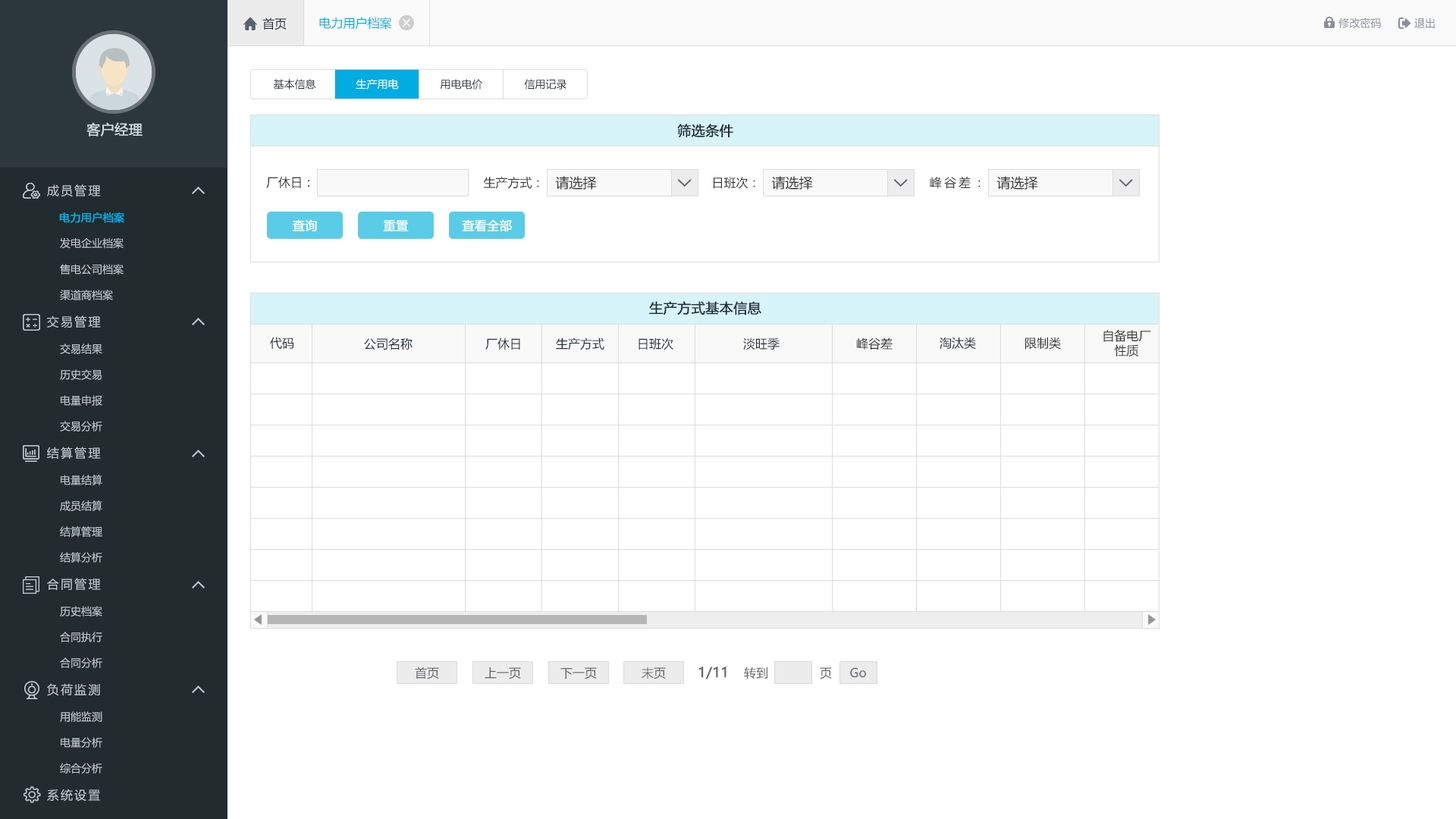
<style>
.page{position:relative;width:1456px;height:819px;background:#ffffff}
.page>*{position:absolute;margin:0}
.t1{font:12.1px "MicrosoftYaHei";color:#242e3b}
.t2{font:12.1px "MicrosoftYaHei";color:#00ace2}
.t3{font:10.6px "MicrosoftYaHei";color:#8a8f99}
.t4{font:10.6px "MicrosoftYaHei";color:#242e3b}
.t5{font:10.6px "MicrosoftYaHei";color:#ffffff}
.t6{font:13.6px "MicrosoftYaHei";color:#d1dce2;font-weight:bold}
.t7{font:13.6px "MicrosoftYaHei";color:#242e3b;font-weight:bold}
.t8{font:12.1px "MicrosoftYaHei";letter-spacing:0.14em;color:#c2cdd2}
.t9{font:12.1px "MicrosoftYaHei";color:#333333}
.t10{font:13.6px "MicrosoftYaHei";color:#333333}
.t11{font:12.1px "MicrosoftYaHei";letter-spacing:0.2em;color:#333333}
.t12{font:10.6px "MicrosoftYaHei";color:#00ace2;font-weight:bold}
.t13{font:12.1px "MicrosoftYaHei";color:#ffffff;font-weight:bold}
.t14{font:10.6px "MicrosoftYaHei";color:#c2cdd2}
.t15{font:12.1px "MicrosoftYaHei";color:#61656b}
.t16{font:13.6px "MicrosoftYaHei";color:#61656b;font-weight:bold}
</style>
<div class="page">
<p class="t1" style="left:262px;top:17px;width:25px;height:13px">首页</p>
<p class="t2" style="left:319px;top:17px;width:73px;height:13px">电力用户档案</p>
<p class="t3" style="left:1338px;top:17px;width:43px;height:12px">修改密码</p>
<p class="t3" style="left:1414px;top:17px;width:21px;height:11px">退出</p>
<p class="t4" style="left:273px;top:79px;width:43px;height:10px">基本信息</p>
<p class="t5" style="left:356px;top:79px;width:43px;height:10px">生产用电</p>
<p class="t4" style="left:440px;top:79px;width:43px;height:10px">用电电价</p>
<p class="t4" style="left:524px;top:79px;width:42px;height:10px">信用记录</p>
<p class="t6" style="left:86px;top:122px;width:57px;height:14px">客户经理</p>
<p class="t7" style="left:677px;top:124px;width:56px;height:14px">筛选条件</p>
<p class="t8" style="left:47px;top:184px;width:54px;height:13px">成员管理</p>
<p class="t9" style="left:266px;top:176px;width:43px;height:12px">厂休日：</p>
<p class="t9" style="left:483px;top:177px;width:56px;height:12px">生产方式：</p>
<p class="t10" style="left:555px;top:176px;width:42px;height:14px">请选择</p>
<p class="t9" style="left:714px;top:177px;width:41px;height:12px">日班次：</p>
<p class="t10" style="left:771px;top:176px;width:42px;height:14px">请选择</p>
<p class="t11" style="left:930px;top:177px;width:51px;height:12px">峰谷差<span class="t9">：</span></p>
<p class="t10" style="left:996px;top:176px;width:42px;height:14px">请选择</p>
<p class="t12" style="left:59px;top:212px;width:65px;height:11px">电力用户档案</p>
<p class="t13" style="left:292px;top:219px;width:25px;height:12px">查询</p>
<p class="t13" style="left:383px;top:220px;width:26px;height:11px">重置</p>
<p class="t13" style="left:462px;top:219px;width:50px;height:13px">查看全部</p>
<p class="t14" style="left:60px;top:237px;width:64px;height:12px">发电企业档案</p>
<p class="t14" style="left:60px;top:264px;width:64px;height:11px">售电公司档案</p>
<p class="t14" style="left:60px;top:290px;width:53px;height:10px">渠道商档案</p>
<p class="t7" style="left:649px;top:301px;width:112px;height:14px">生产方式基本信息</p>
<p class="t8" style="left:47px;top:315px;width:54px;height:13px">交易管理</p>
<p class="t9" style="left:1103px;top:329px;width:48px;height:27px;text-align:center">自备电厂<br>性质</p>
<p class="t1" style="left:270px;top:337px;width:24px;height:12px">代码</p>
<p class="t1" style="left:364px;top:337px;width:49px;height:13px">公司名称</p>
<p class="t1" style="left:485px;top:337px;width:35px;height:13px">厂休日</p>
<p class="t1" style="left:556px;top:337px;width:48px;height:13px">生产方式</p>
<p class="t1" style="left:639px;top:337px;width:34px;height:13px">日班次</p>
<p class="t1" style="left:743px;top:337px;width:37px;height:13px">淡旺季</p>
<p class="t9" style="left:856px;top:337px;width:37px;height:13px">峰谷差</p>
<p class="t1" style="left:940px;top:337px;width:36px;height:13px">淘汰类</p>
<p class="t9" style="left:1025px;top:337px;width:36px;height:13px">限制类</p>
<p class="t14" style="left:60px;top:344px;width:42px;height:10px">交易结果</p>
<p class="t14" style="left:60px;top:369px;width:42px;height:11px">历史交易</p>
<p class="t14" style="left:61px;top:395px;width:41px;height:11px">电量申报</p>
<p class="t14" style="left:60px;top:421px;width:42px;height:10px">交易分析</p>
<p class="t8" style="left:47px;top:447px;width:54px;height:13px">结算管理</p>
<p class="t14" style="left:61px;top:475px;width:41px;height:10px">电量结算</p>
<p class="t14" style="left:60px;top:500px;width:42px;height:11px">成员结算</p>
<p class="t14" style="left:60px;top:526px;width:42px;height:11px">结算管理</p>
<p class="t14" style="left:60px;top:552px;width:42px;height:11px">结算分析</p>
<p class="t8" style="left:47px;top:578px;width:54px;height:12px">合同管理</p>
<p class="t14" style="left:60px;top:606px;width:42px;height:11px">历史档案</p>
<p class="t14" style="left:60px;top:632px;width:42px;height:10px">合同执行</p>
<p class="t14" style="left:60px;top:657px;width:42px;height:11px">合同分析</p>
<p class="t15" style="left:415px;top:667px;width:24px;height:12px">首页</p>
<p class="t15" style="left:485px;top:667px;width:36px;height:12px">上一页</p>
<p class="t15" style="left:560px;top:667px;width:37px;height:12px">下一页</p>
<p class="t15" style="left:642px;top:667px;width:24px;height:12px">末页</p>
<p class="t16" style="left:698px;top:667px;width:28px;height:12px">1/11</p>
<p class="t15" style="left:744px;top:667px;width:23px;height:12px">转到</p>
<p class="t15" style="left:820px;top:667px;width:12px;height:12px">页</p>
<p class="t15" style="left:850px;top:667px;width:16px;height:11px">Go</p>
<p class="t8" style="left:47px;top:683px;width:53px;height:13px">负荷监测</p>
<p class="t14" style="left:60px;top:711px;width:42px;height:11px">用能监测</p>
<p class="t14" style="left:61px;top:737px;width:41px;height:11px">电量分析</p>
<p class="t14" style="left:60px;top:763px;width:42px;height:10px">综合分析</p>
<p class="t8" style="left:47px;top:789px;width:53px;height:13px">系统设置</p>
</div>
